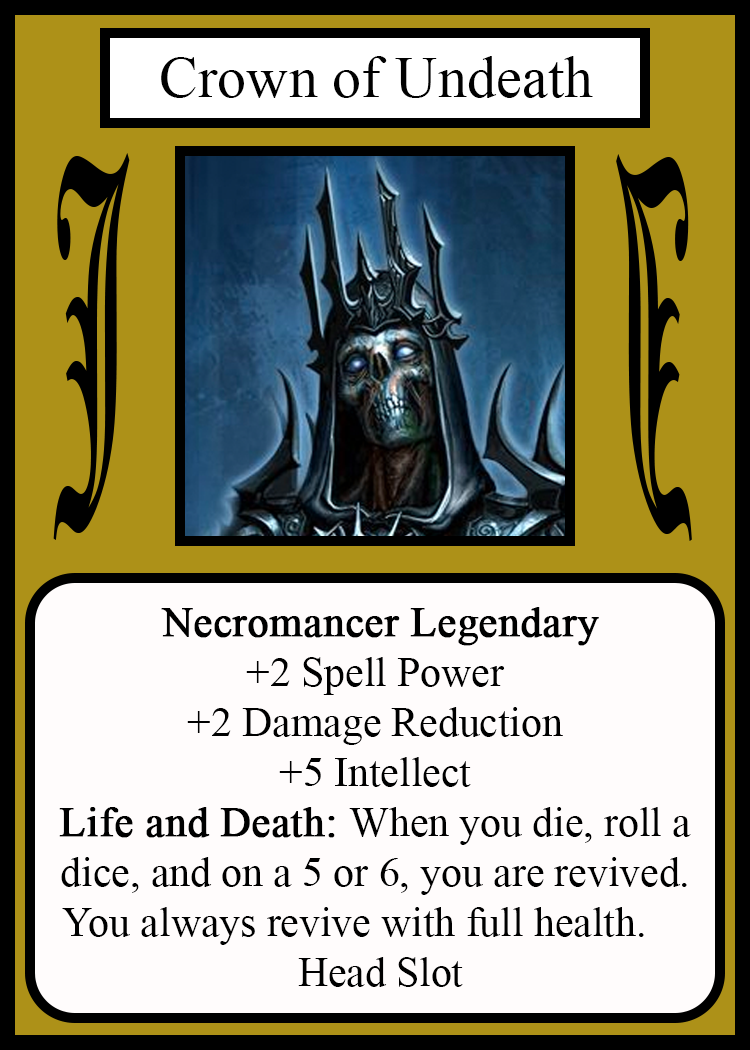
<style>
.page{position:relative;width:750px;height:1050px;background:#fffcfc}
.page>*{position:absolute;margin:0}
.t1{font:58.3px "TimesNewRomanPSMT";color:#010101}
.t2{font:450.1px "OldEnglishTextMT";color:#000000;scale:0.26 1}
.t3{font:449.7px "OldEnglishTextMT";color:#000000;scale:0.26 1}
.t4{font:41.7px "TimesNewRomanPSMT";color:#000000}
.t5{font:41.7px "TimesNewRomanPSMT";color:#000000;font-weight:bold}
</style>
<div class="page">
<p class="t1" style="left:161px;top:56px;width:432px;height:42px">Crown of Undeath</p>
<p class="t2" style="left:53px;top:153px;width:77px;height:387px">J</p>
<p class="t3" style="left:616px;top:154px;width:76px;height:387px;rotate:180deg">J</p>
<p class="t4" style="left:59px;top:607px;width:632px;height:380px;text-align:center"><span class="t5">Necromancer Legendary</span><br>+2 Spell Power<br>+2 Damage Reduction<br>+5 Intellect<br><span class="t5">Life and Death: </span>When you die, roll a<br>dice, and on a 5 or 6, you are revived.<br>You always revive with full health.    <br> Head Slot</p>
</div>
